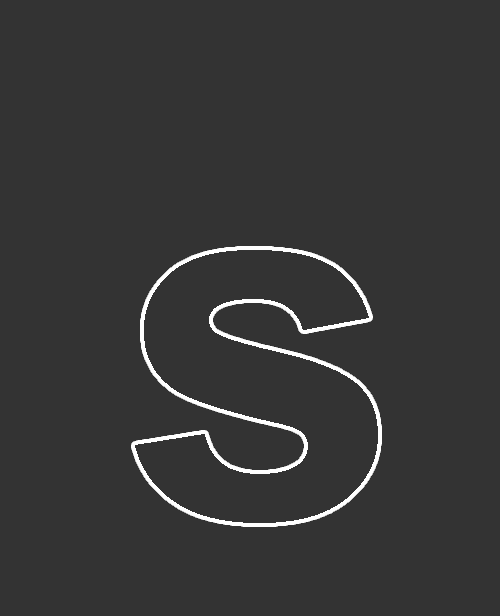
<style>
.page{position:relative;width:500px;height:616px;background:#333333}
.page>*{position:absolute;margin:0}
.t1{font:500px "Arial-BoldMT";color:#333333}
</style>
<div class="page">
<p class="t1" style="left:135px;top:250px;width:243px;height:273px">ѕ</p>
</div>
